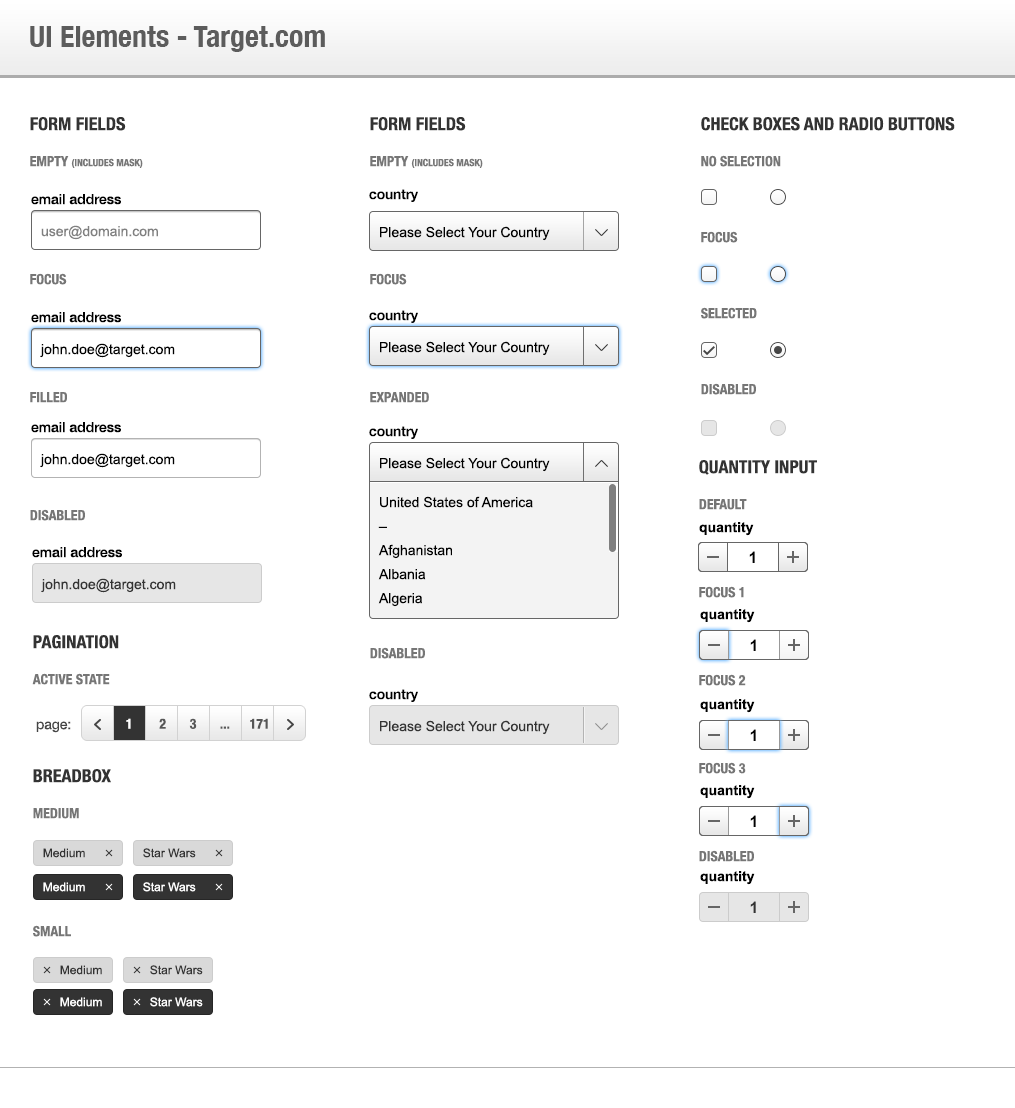
<style>
.page{position:relative;width:1015px;height:1108px;background:#ffffff}
.page>*{position:absolute;margin:0}
.t1{font:30px "HelveticaNeue-CondensedBold";color:#5c5c5c}
.t2{font:14px/18px "HelveticaNeue-CondensedBold";color:#767676;text-transform:uppercase}
.t3{font:18px/18px "HelveticaNeue-CondensedBold";color:#333333;text-transform:uppercase}
.t4{font:10px/18px "HelveticaNeue-CondensedBold";color:#767676;text-transform:uppercase}
.t5{font:12px "MyriadPro-Regular";color:#000000}
.t6{font:14px "ArialMT";color:#808080}
.t7{font:14px "ArialMT";color:#000000}
.t8{font:14px/18px "ArialMT";color:#000000}
.t9{font:14px "Arial-BoldMT";color:#000000}
.t10{font:16px "Arial-BoldMT";letter-spacing:0.2em;color:#010101}
.t11{font:14px "ArialMT";color:#333333}
.t12{font:14px "HelveticaNeueLTStd-Roman";color:#454545}
.t13{font:14px "HelveticaNeue-CondensedBold";color:#565656;text-transform:uppercase}
.t14{font:14px "HelveticaNeue-CondensedBold";color:#ffffff;text-transform:uppercase}
.t15{font:12px "ArialMT";color:#333333}
.t16{font:12px "ArialMT";color:#ffffff}
.t17{font:16px "Arial-BoldMT";letter-spacing:0.2em;color:#333333}
</style>
<div class="page">
<p class="t1" style="left:30px;top:26px;width:295px;height:26px">UI Elements - Target.com</p>
<p class="t2" style="left:30px;top:117px;width:113px;height:404px"><span class="t3">Form Fields<br><br></span>Empty <span class="t4">(includes mask)<br></span>focus<br>filled<br>disabled</p>
<p class="t2" style="left:370px;top:117px;width:113px;height:542px"><span class="t3">Form Fields<br><br></span>Empty <span class="t4">(includes mask)<br></span>focus<br>Expanded<br><br>disabled</p>
<p class="t2" style="left:701px;top:117px;width:254px;height:278px"><span class="t3">Check boxes and radio buttons<br><br></span>No selection<br>focus<br>Selected<br>disabled</p>
<p class="t5" style="left:31px;top:194px;width:90px;height:11px">email address</p>
<p class="t5" style="left:369px;top:189px;width:49px;height:13px">country</p>
<p class="t6" style="left:41px;top:225px;width:117px;height:15px">user@domain.com</p>
<p class="t7" style="left:380px;top:226px;width:170px;height:15px">Please Select Your Country</p>
<p class="t5" style="left:31px;top:312px;width:90px;height:11px">email address</p>
<p class="t5" style="left:369px;top:310px;width:49px;height:13px">country</p>
<p class="t7" style="left:380px;top:341px;width:170px;height:15px">Please Select Your Country</p>
<p class="t7" style="left:40px;top:343px;width:135px;height:15px">john.doe@target.com</p>
<p class="t5" style="left:31px;top:422px;width:90px;height:11px">email address</p>
<p class="t5" style="left:369px;top:426px;width:49px;height:13px">country</p>
<p class="t7" style="left:40px;top:453px;width:135px;height:15px">john.doe@target.com</p>
<p class="t7" style="left:380px;top:457px;width:170px;height:15px">Please Select Your Country</p>
<p class="t2" style="left:699px;top:460px;width:118px;height:402px"><span class="t3">Quantity input<br><br></span>default<br>focus 1<br>focus 2<br>focus 3<br>disabled</p>
<p class="t8" style="left:378px;top:496px;width:155px;height:111px">United States of America<br>–<br>Afghanistan<br>Albania<br>Algeria<br>Andorra<br>Angola<br>Antigua and Barbuda</p>
<p class="t9" style="left:699px;top:522px;width:55px;height:14px">quantity</p>
<p class="t5" style="left:32px;top:547px;width:90px;height:11px">email address</p>
<p class="t10" style="left:749px;top:551px;width:6px;height:12px">1</p>
<p class="t11" style="left:41px;top:578px;width:135px;height:15px">john.doe@target.com</p>
<p class="t9" style="left:700px;top:609px;width:55px;height:14px">quantity</p>
<p class="t2" style="left:32px;top:635px;width:87px;height:50px"><span class="t3">Pagination<br><br></span>Active state</p>
<p class="t10" style="left:750px;top:639px;width:6px;height:12px">1</p>
<p class="t5" style="left:369px;top:689px;width:49px;height:13px">country</p>
<p class="t9" style="left:700px;top:699px;width:55px;height:14px">quantity</p>
<p class="t12" style="left:36px;top:721px;width:35px;height:12px">page:</p>
<p class="t13" style="left:126px;top:718px;width:142px;height:11px"><span class="t14">1</span>        2       3       ...      171</p>
<p class="t11" style="left:380px;top:720px;width:170px;height:15px">Please Select Your Country</p>
<p class="t10" style="left:750px;top:729px;width:6px;height:12px">1</p>
<p class="t2" style="left:33px;top:769px;width:78px;height:168px"><span class="t3">breadbox<br><br></span>medium<br>small</p>
<p class="t9" style="left:700px;top:785px;width:55px;height:14px">quantity</p>
<p class="t10" style="left:750px;top:815px;width:6px;height:12px">1</p>
<p class="t15" style="left:43px;top:848px;width:42px;height:10px">Medium</p>
<p class="t15" style="left:143px;top:848px;width:53px;height:10px">Star Wars</p>
<p class="t9" style="left:700px;top:871px;width:55px;height:14px">quantity</p>
<p class="t16" style="left:43px;top:882px;width:42px;height:10px">Medium</p>
<p class="t16" style="left:143px;top:882px;width:53px;height:10px">Star Wars</p>
<p class="t17" style="left:750px;top:901px;width:6px;height:12px">1</p>
<p class="t15" style="left:60px;top:965px;width:42px;height:10px">Medium</p>
<p class="t15" style="left:150px;top:965px;width:53px;height:10px">Star Wars</p>
<p class="t16" style="left:60px;top:997px;width:42px;height:10px">Medium</p>
<p class="t16" style="left:150px;top:997px;width:53px;height:10px">Star Wars</p>
</div>
